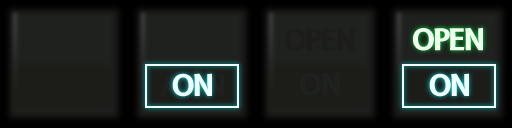
<style>
.page{position:relative;width:512px;height:128px}
.page>*{position:absolute;margin:0}
.t1{font:29.2px "B612-Bold";letter-spacing:-0.075em;color:#1c1d19}
.t2{font:29.2px "B612-Bold";letter-spacing:-0.075em;color:#1f211e}
</style>
<div class="page">
<p class="t1" style="left:284px;top:28px;width:71px;height:23px">OPEN</p>
<p class="t2" style="left:300px;top:73px;width:40px;height:23px">ON</p>
</div>
